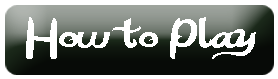
<style>
.page{position:relative;width:278px;height:79px;background:#ffffff}
.page>*{position:absolute;margin:0}
.t1{font:58.3px "KatyBerry";color:#ffffff;scale:1.3 1}
</style>
<div class="page">
<p class="t1" style="left:26px;top:17px;width:230px;height:42px">How to Play</p>
</div>
